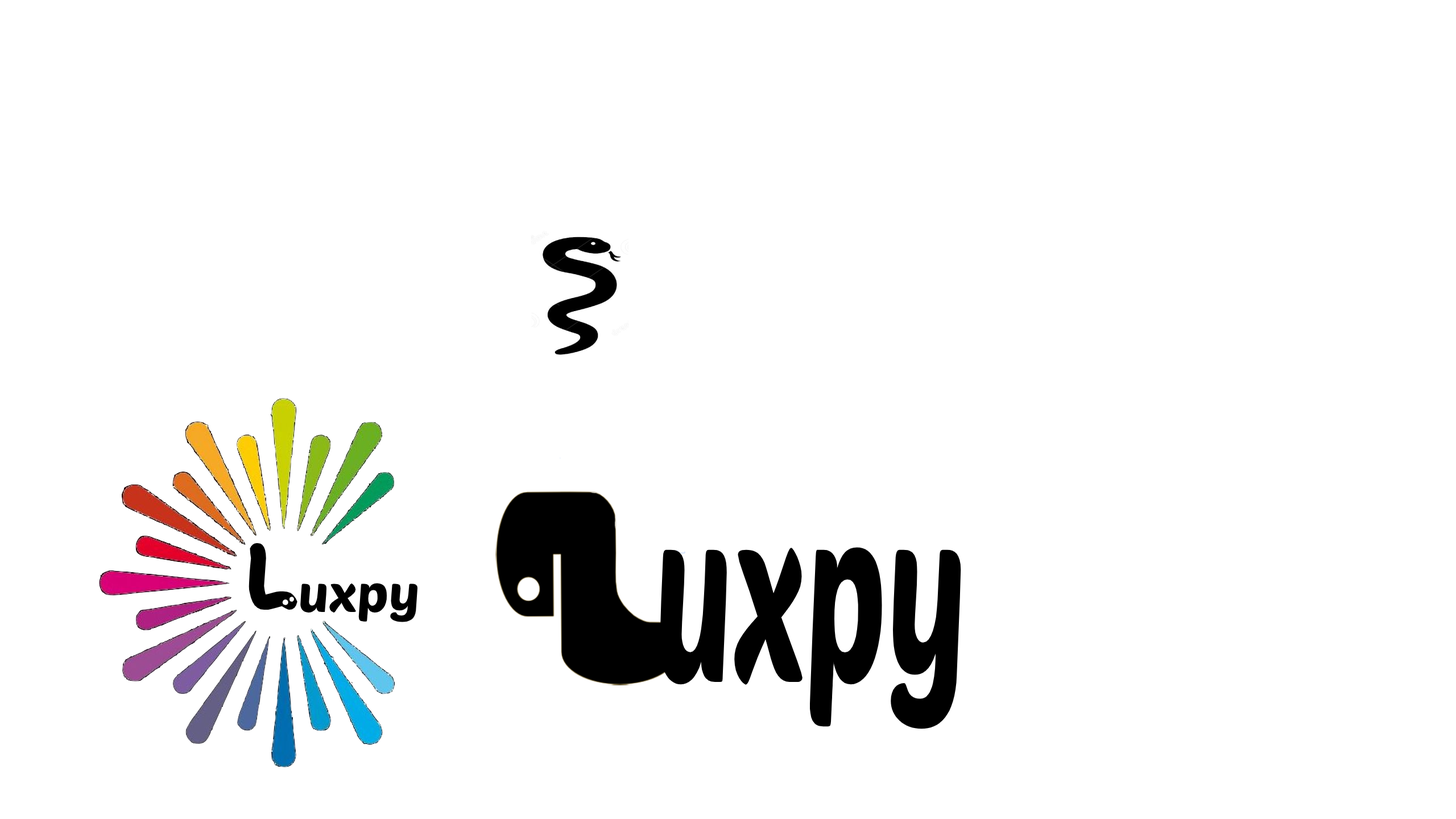
<style>
.page{position:relative;width:1456px;height:819px;background:#ffffff}
.page>*{position:absolute;margin:0}
.t1{font:51.2px "PoetsenOne-Regular";color:#000000}
.t2{font:85.3px "SnakeChan";color:#000000}
</style>
<div class="page">
<p class="t1" style="left:249px;top:543px;width:168px;height:79px"><span class="t2">L</span>uxpy</p>
</div>
